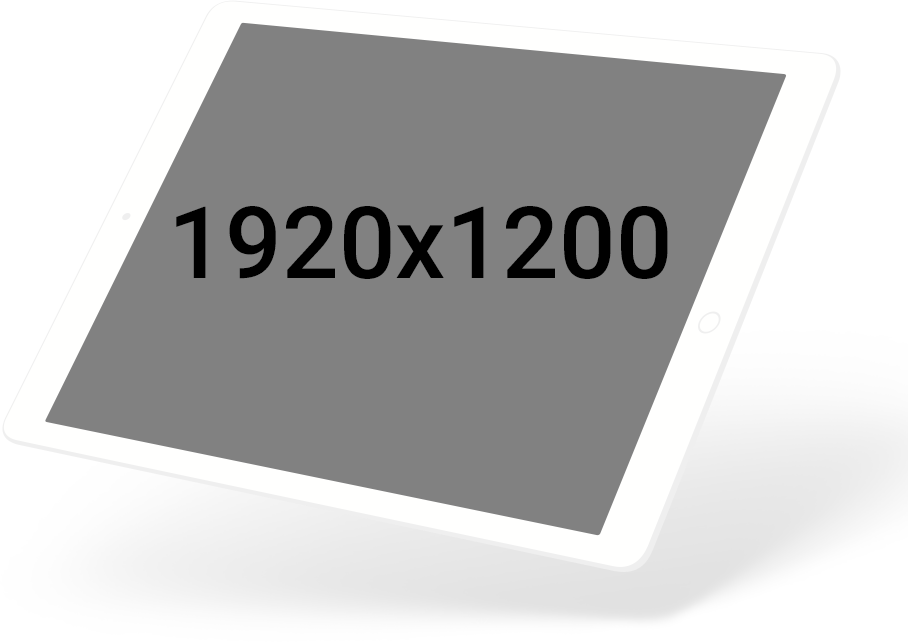
<style>
.page{position:relative;width:908px;height:642px;background:#818181}
.page>*{position:absolute;margin:0}
.t1{font:100px "Roboto-Medium";color:#000000}
</style>
<div class="page">
<p class="t1" style="left:176px;top:206px;width:492px;height:73px">1920x1200</p>
</div>
